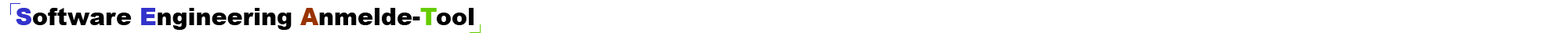
<style>
.page{position:relative;width:1568px;height:33px;background:#ffffff}
.page>*{position:absolute;margin:0}
.t1{font:23.5px "Arial-Black";color:#000000}
.t2{font:23.5px "Arial-Black";color:#3333cc}
.t3{font:23.5px "Arial-Black";color:#993300}
.t4{font:23.5px "Arial-Black";color:#66cc00}
</style>
<div class="page">
<p class="t1" style="left:16px;top:8px;width:458px;height:22px"><span class="t2">S</span>oftware <span class="t2">E</span>ngineering <span class="t3">A</span>nmelde-<span class="t4">T</span>ool</p>
</div>
